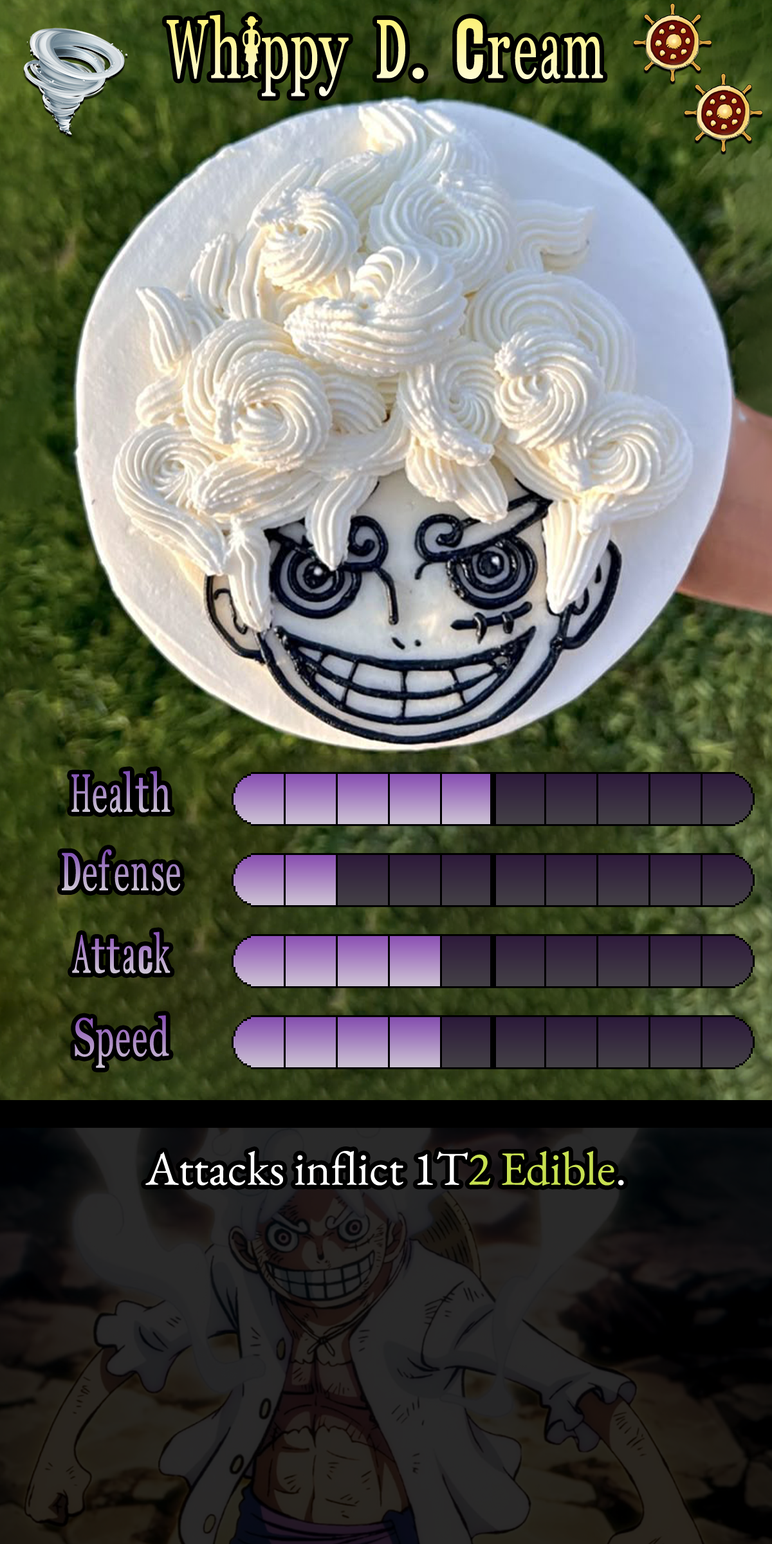
<style>
.page{position:relative;width:772px;height:1544px}
.page>*{position:absolute;margin:0}
.t1{font:143.5px "ONEPIECE"}
.t2{font:92.7px "ONEPIECE"}
.t3{font:81.7px "EBGaramond-Regular";color:#ffffff}
.t4{font:81.7px "EBGaramond-Regular";color:#c7e050}
</style>
<div class="page">
<p class="t1" style="left:167px;top:15px;width:437px;height:82px">Whippy D. Cream</p>
<p class="t2" style="left:71px;top:771px;width:100px;height:42px">Health</p>
<p class="t2" style="left:62px;top:849px;width:119px;height:43px">Defense</p>
<p class="t2" style="left:72px;top:932px;width:99px;height:42px">Attack</p>
<p class="t2" style="left:75px;top:1015px;width:94px;height:53px">Speed</p>
<p class="t3" style="left:145px;top:1151px;width:479px;height:35px">Attacks inflict 1T<span class="t4">2 Edible</span>.</p>
</div>
